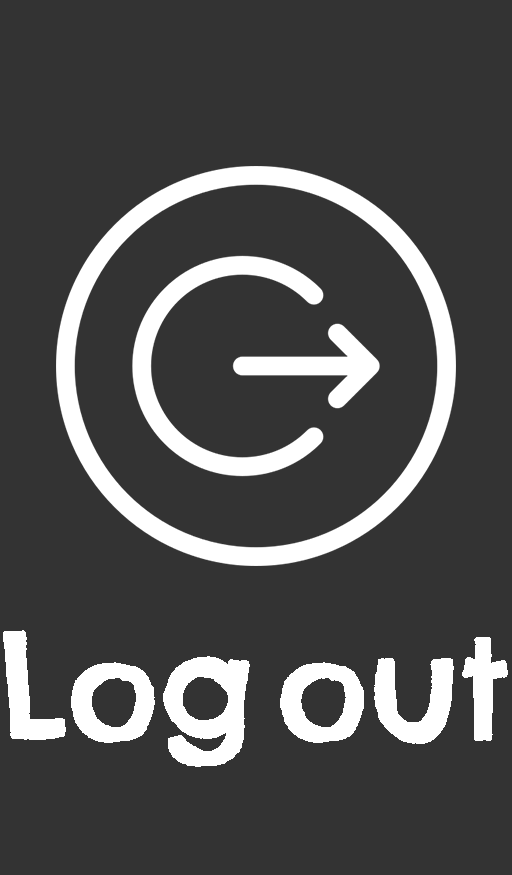
<style>
.page{position:relative;width:512px;height:875px;background:#333333}
.page>*{position:absolute;margin:0}
.t1{font:137.7px "ChelseaMarket-Regular";color:#ffffff;font-weight:bold}
</style>
<div class="page">
<p class="t1" style="left:3px;top:630px;width:505px;height:137px">Log out</p>
</div>
